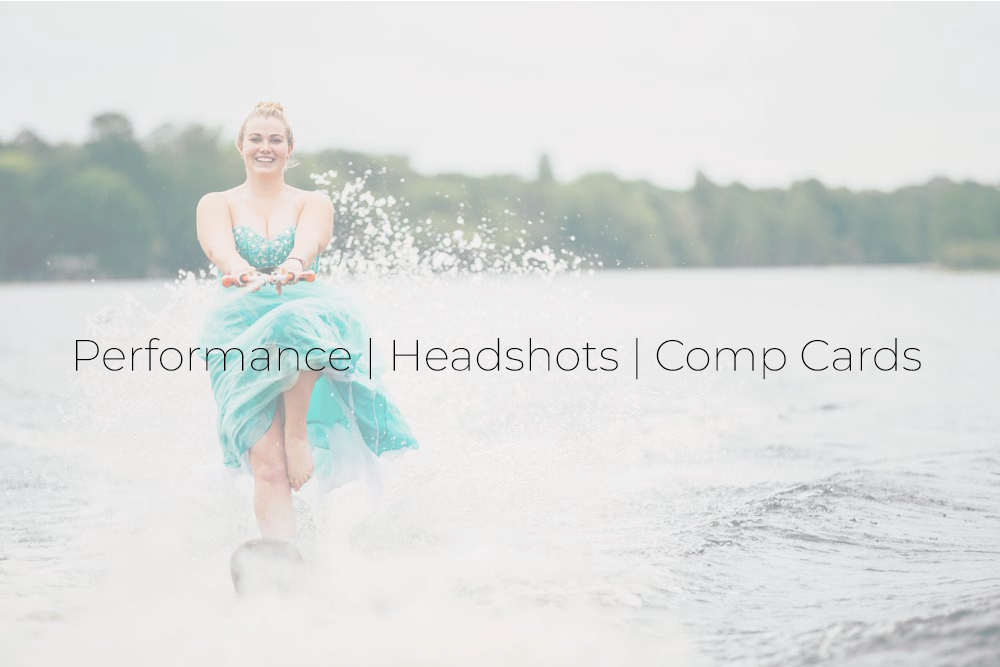
<style>
.page{position:relative;width:1000px;height:667px}
.page>*{position:absolute;margin:0}
.t1{font:44px "Montserrat-ExtraLight";color:#000000}
</style>
<div class="page">
<p class="t1" style="left:76px;top:338px;width:845px;height:42px">Performance | Headshots | Comp Cards</p>
</div>
